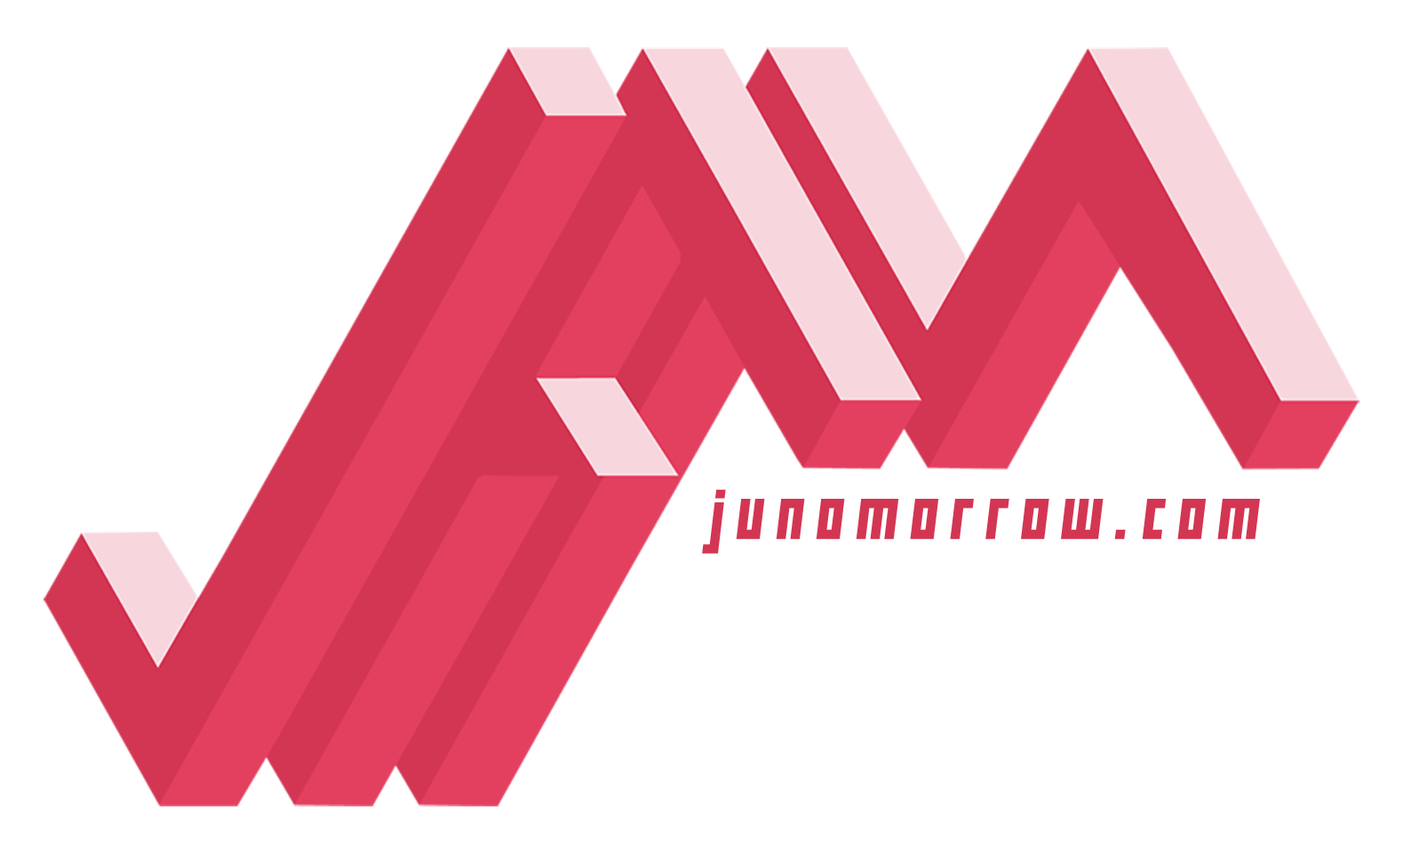
<style>
.page{position:relative;width:1403px;height:850px;background:#ffffff}
.page>*{position:absolute;margin:0}
.t1{font:59.4px "Buran-USSR";letter-spacing:0.2em;color:#d33653}
</style>
<div class="page">
<p class="t1" style="left:702px;top:489px;width:558px;height:65px">junomorrow.com</p>
</div>
